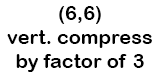
<style>
.page{position:relative;width:160px;height:75px;background:#ffffff}
.page>*{position:absolute;margin:0}
.t1{font:20px/24px "ArialRoundedMTBold";color:#000000}
</style>
<div class="page">
<p class="t1" style="left:7px;top:6px;width:145px;height:66px;text-align:center">(6,6)<br>vert. compress<br>by factor of 3</p>
</div>
